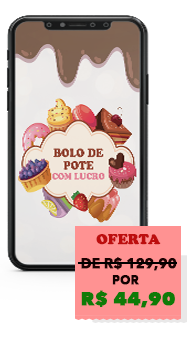
<style>
.page{position:relative;width:193px;height:343px;background:#ffffff}
.page>*{position:absolute;margin:0}
.t1{font:13.6px "CooperBlackStd";color:#bd0e0e;text-transform:uppercase;font-weight:bold}
.t2{font:13.6px "AvenirNext-Bold";color:#1d0202;text-transform:uppercase;font-weight:bold}
.t3{font:18.8px/20.2px "AvenirNext-Heavy";color:#0f7b07;text-transform:uppercase;font-weight:bold}
.t4{font:11.9px/15px "AvenirNext-Bold";color:#120202;text-transform:uppercase;font-weight:bold}
</style>
<div class="page">
<p class="t1" style="left:96px;top:233px;width:65px;height:12px">OFERTA</p>
<p class="t2" style="left:81px;top:257px;width:96px;height:14px">DE R$ 129,90</p>
<p class="t3" style="left:81px;top:275px;width:94px;height:33px;text-align:center"><span class="t4">POR<br></span> R$ 44,90</p>
</div>
